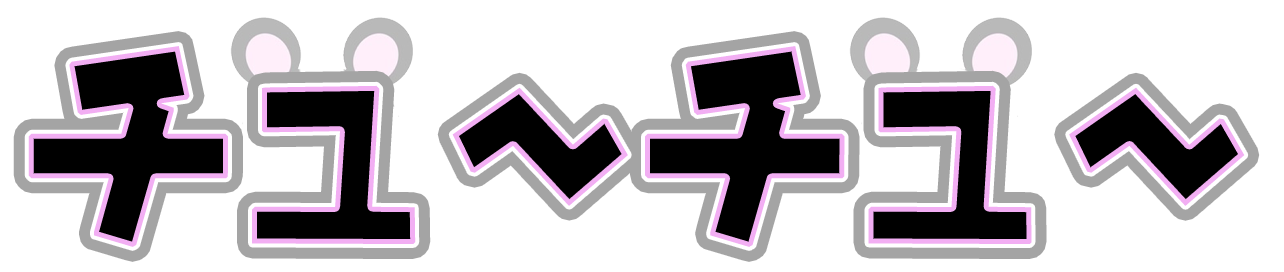
<style>
.page{position:relative;width:1284px;height:272px;background:#ffffff}
.page>*{position:absolute;margin:0}
.t1{font:200px "haramase_nyanko";color:#000000;font-weight:bold}
</style>
<div class="page">
<p class="t1" style="left:28px;top:46px;width:1217px;height:201px">チュ～チュ～</p>
</div>
